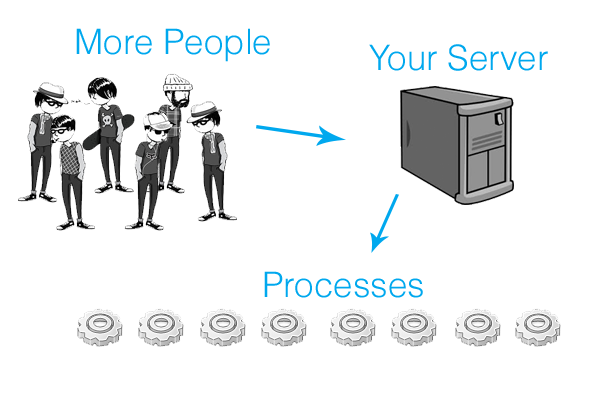
<style>
.page{position:relative;width:600px;height:400px;background:#ffffff}
.page>*{position:absolute;margin:0}
.t1{font:35px "Helvetica-Light";color:#00a8ee}
</style>
<div class="page">
<p class="t1" style="left:76px;top:28px;width:194px;height:34px">More People</p>
<p class="t1" style="left:369px;top:44px;width:179px;height:27px">Your Server</p>
<p class="t1" style="left:264px;top:271px;width:159px;height:27px">Processes</p>
</div>
